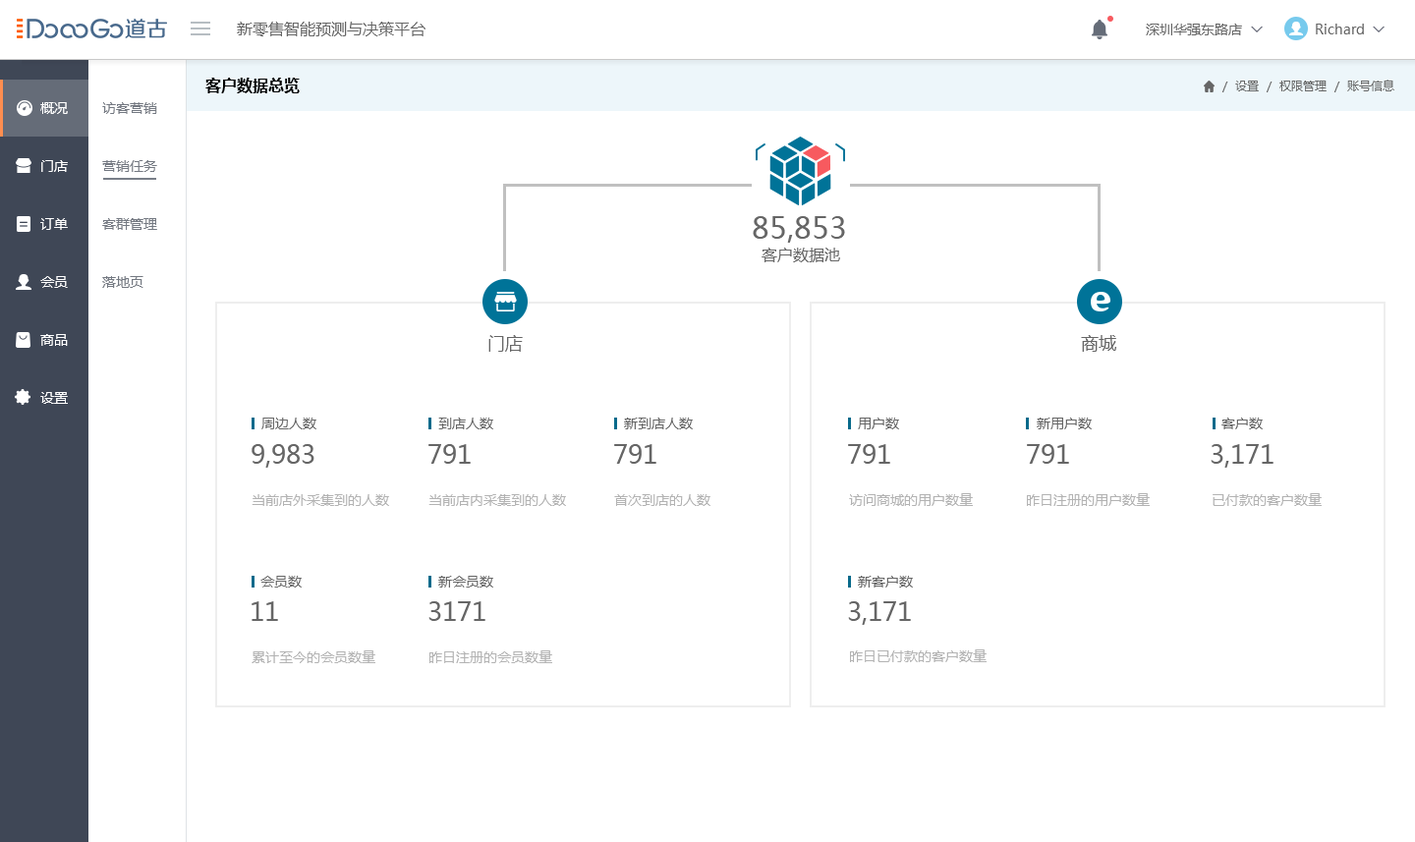
<style>
.page{position:relative;width:1415px;height:842px;background:#ffffff}
.page>*{position:absolute;margin:0}
.t1{font:15.7px "MicrosoftYaHeiUI";color:#666666}
.t2{font:13.8px "MicrosoftYaHeiUI";color:#666666}
.t3{font:13.8px "Marlett";color:#666666}
.t4{font:15.7px "MicrosoftYaHeiUI-Bold";color:#000000}
.t5{font:11.8px "MicrosoftYaHeiUI";color:#666666}
.t6{font:13.8px/58px "MicrosoftYaHeiUI";color:#ffffff}
.t7{font:13.8px/58px "MicrosoftYaHeiUI";color:#747982}
.t8{font:29.5px "MicrosoftYaHeiUI";color:#666666}
.t9{font:17.7px "MicrosoftYaHeiUI";color:#666666}
.t10{font:25.6px "MicrosoftYaHeiUI";color:#666666}
.t11{font:13.8px "MicrosoftYaHeiUI";color:#b3b3b3}
</style>
<div class="page">
<p class="t1" style="left:237px;top:22px;width:189px;height:14px">新零售智能预测与决策平台</p>
<p class="t2" style="left:1146px;top:24px;width:96px;height:11px">深圳华强东路店</p>
<p class="t2" style="left:1316px;top:24px;width:64px;height:10px">Richard <span class="t3">6</span></p>
<p class="t4" style="left:205px;top:78px;width:95px;height:15px">客户数据总览</p>
<p class="t5" style="left:1223px;top:80px;width:172px;height:12px">/  设置  /  权限管理  /  账号信息</p>
<p class="t6" style="left:40px;top:102px;width:28px;height:302px">概况<br>门店<br>订单<br>会员<br>商品<br>设置</p>
<p class="t7" style="left:102px;top:102px;width:55px;height:186px">访客营销<br>营销任务<br>客群管理<br>落地页</p>
<p class="t8" style="left:753px;top:216px;width:92px;height:27px">85,853</p>
<p class="t1" style="left:762px;top:248px;width:78px;height:14px">客户数据池</p>
<p class="t9" style="left:489px;top:335px;width:34px;height:17px">门店</p>
<p class="t9" style="left:1081px;top:335px;width:36px;height:17px">商城</p>
<p class="t2" style="left:261px;top:418px;width:56px;height:12px">周边人数</p>
<p class="t2" style="left:438px;top:418px;width:55px;height:12px">到店人数</p>
<p class="t2" style="left:624px;top:418px;width:69px;height:12px">新到店人数</p>
<p class="t2" style="left:858px;top:418px;width:41px;height:12px">用户数</p>
<p class="t2" style="left:1037px;top:418px;width:55px;height:12px">新用户数</p>
<p class="t2" style="left:1222px;top:418px;width:41px;height:12px">客户数</p>
<p class="t10" style="left:252px;top:444px;width:63px;height:24px">9,983</p>
<p class="t10" style="left:429px;top:444px;width:42px;height:20px">791</p>
<p class="t10" style="left:614px;top:444px;width:43px;height:20px">791</p>
<p class="t10" style="left:848px;top:444px;width:43px;height:20px">791</p>
<p class="t10" style="left:1027px;top:444px;width:42px;height:20px">791</p>
<p class="t10" style="left:1211px;top:444px;width:63px;height:24px">3,171</p>
<p class="t11" style="left:252px;top:494px;width:137px;height:12px">当前店外采集到的人数</p>
<p class="t11" style="left:429px;top:494px;width:137px;height:12px">当前店内采集到的人数</p>
<p class="t11" style="left:614px;top:494px;width:97px;height:12px">首次到店的人数</p>
<p class="t11" style="left:849px;top:493px;width:124px;height:13px">访问商城的用户数量</p>
<p class="t11" style="left:1027px;top:493px;width:123px;height:13px">昨日注册的用户数量</p>
<p class="t11" style="left:1213px;top:493px;width:109px;height:13px">已付款的客户数量</p>
<p class="t2" style="left:260px;top:576px;width:42px;height:12px">会员数</p>
<p class="t2" style="left:438px;top:576px;width:55px;height:12px">新会员数</p>
<p class="t2" style="left:858px;top:576px;width:55px;height:12px">新客户数</p>
<p class="t10" style="left:252px;top:602px;width:26px;height:19px">11</p>
<p class="t10" style="left:429px;top:602px;width:57px;height:19px">3171</p>
<p class="t10" style="left:848px;top:602px;width:63px;height:23px">3,171</p>
<p class="t11" style="left:252px;top:651px;width:123px;height:13px">累计至今的会员数量</p>
<p class="t11" style="left:430px;top:651px;width:122px;height:13px">昨日注册的会员数量</p>
<p class="t11" style="left:850px;top:650px;width:137px;height:13px">昨日已付款的客户数量</p>
</div>
